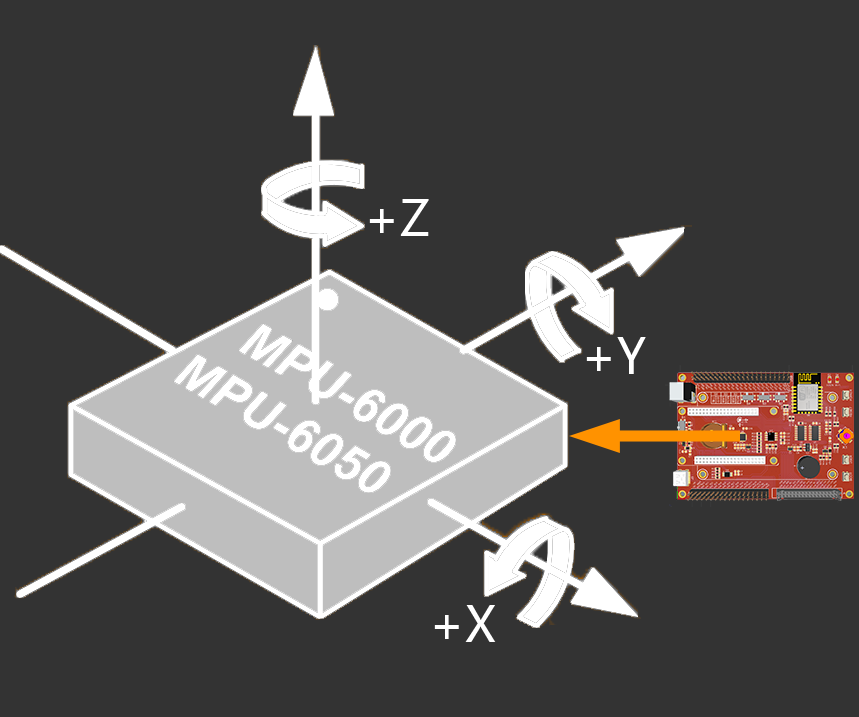
<style>
.page{position:relative;width:859px;height:717px;background:#333333}
.page>*{position:absolute;margin:0}
.t1{font:48px "MicrosoftYaHei";color:#ffffff;font-variant:small-caps}
</style>
<div class="page">
<p class="t1" style="left:369px;top:199px;width:60px;height:37px">+Z</p>
<p class="t1" style="left:586px;top:337px;width:60px;height:37px">+Y</p>
<p class="t1" style="left:434px;top:605px;width:62px;height:37px">+X</p>
</div>
